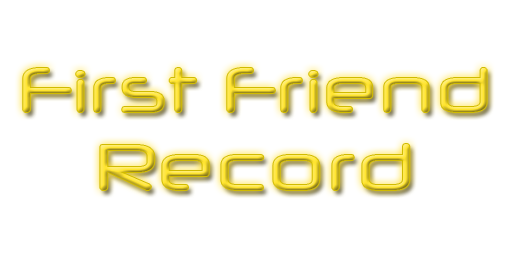
<style>
.page{position:relative;width:512px;height:256px;background:#ffffff}
.page>*{position:absolute;margin:0}
.t1{font:63px "NeuropolXFree"}
.t2{font:65px "NeuropolXFree"}
</style>
<div class="page">
<p class="t1" style="left:23px;top:68px;width:464px;height:122px;text-align:center">First Friend<span class="t2"> Record</span></p>
</div>
